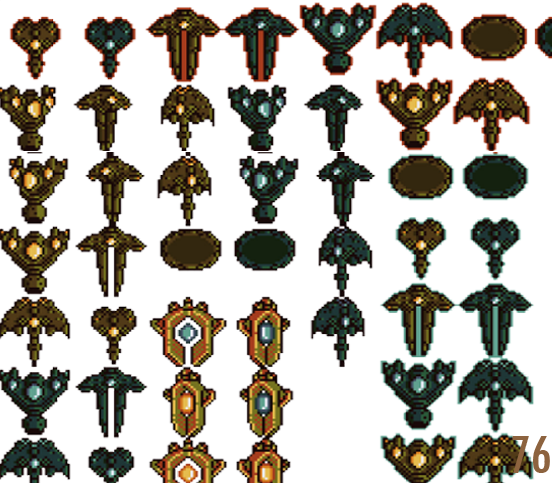
<style>
.page{position:relative;width:552px;height:483px;background:#ffffff}
.page>*{position:absolute;margin:0}
.t1{font:60px "TwCenMT-Condensed";color:#8d633f}
</style>
<div class="page">
<p class="t1" style="left:512px;top:436px;width:38px;height:37px">76</p>
</div>
